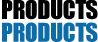
<style>
.page{position:relative;width:98px;height:42px;background:#000000}
.page>*{position:absolute;margin:0}
.t1{font:24px/11.4px "Impact";letter-spacing:-0.025em;color:#000000}
.t2{font:24px/11.4px "Impact";letter-spacing:-0.025em;color:#0c6ca7}
</style>
<div class="page">
<p class="t1" style="left:2px;top:0px;width:96px;height:42px;text-align:center">PRODUCTS<br><br><span class="t2">PRODUCTS</span></p>
</div>
